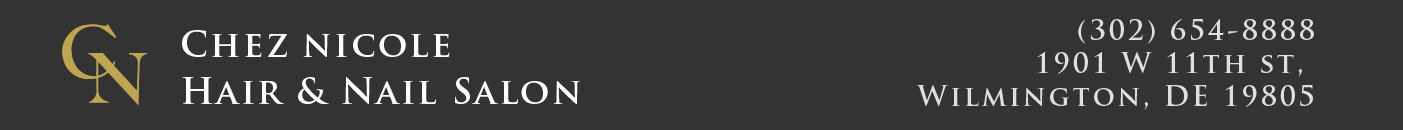
<style>
.page{position:relative;width:1403px;height:130px;background:#333333}
.page>*{position:absolute;margin:0}
.t1{font:35.4px/46.4px "TrajanPro-Bold";letter-spacing:0.06em;color:#ffffff}
.t2{font:27.2px/32.9px "TrajanPro-Bold";letter-spacing:0.1em;color:#dfdfdf}
</style>
<div class="page">
<p class="t1" style="left:182px;top:30px;width:398px;height:74px">Chez nicole<br>Hair &amp; Nail Salon</p>
<p class="t2" style="left:917px;top:19px;width:397px;height:91px;text-align:right">(302) 654-8888<br> 1901 W 11th st, <br>Wilmington, DE 19805</p>
</div>
